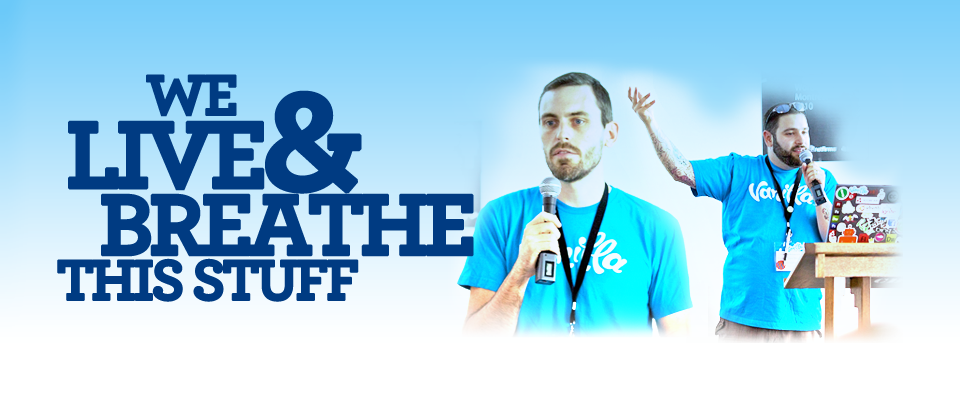
<style>
.page{position:relative;width:960px;height:400px}
.page>*{position:absolute;margin:0}
.t1{font:60px "Archer-Bold";letter-spacing:-0.075em;color:#003b82;text-transform:uppercase;font-weight:bold}
.t2{font:150px "Archer-Bold";letter-spacing:-0.075em;color:#003b82;text-transform:uppercase;font-weight:bold}
.t3{font:100px "Archer-Bold";letter-spacing:-0.075em;color:#003b82;text-transform:uppercase;font-weight:bold}
.t4{font:91px "Archer-Bold";letter-spacing:-0.075em;color:#003b82;text-transform:uppercase;font-weight:bold}
</style>
<div class="page">
<p class="t1" style="left:146px;top:74px;width:91px;height:43px">We</p>
<p class="t2" style="left:265px;top:90px;width:97px;height:104px">&amp;</p>
<p class="t3" style="left:68px;top:120px;width:197px;height:71px">live</p>
<p class="t4" style="left:101px;top:193px;width:373px;height:64px">Breathe</p>
<p class="t1" style="left:57px;top:258px;width:302px;height:44px">This stuff</p>
</div>
